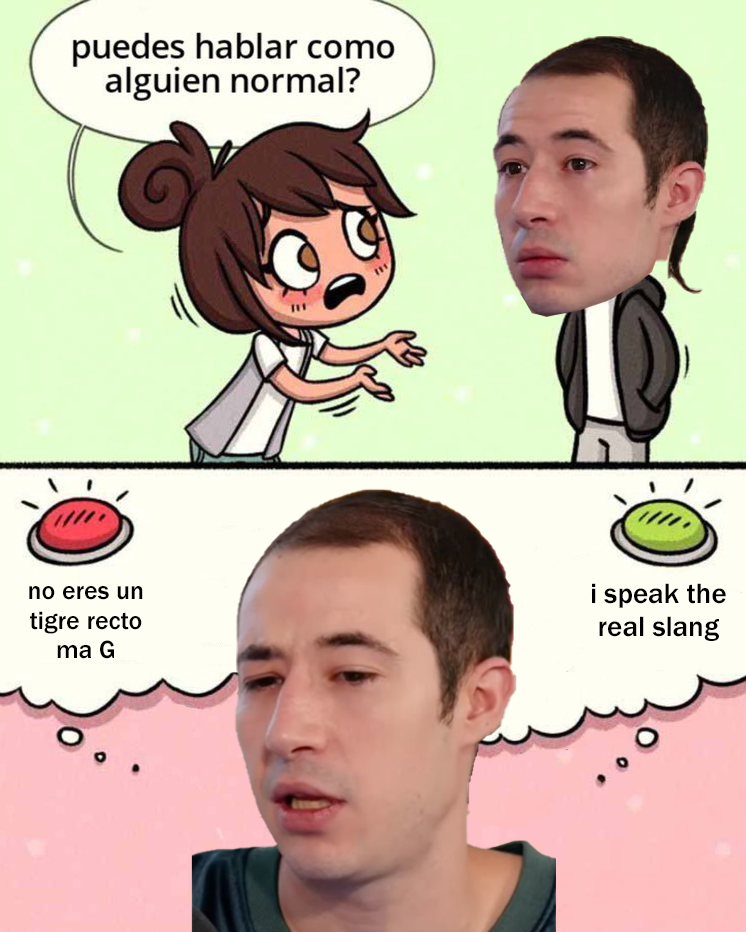
<style>
.page{position:relative;width:746px;height:932px}
.page>*{position:absolute;margin:0}
.t1{font:26px "FranklinGothic-Medium";color:#000000}
.t2{font:29px "FranklinGothic-Medium";color:#000000}
</style>
<div class="page">
<p class="t1" style="left:29px;top:586px;width:114px;height:73px;text-align:center">no eres un<br>tigre recto<br>ma G</p>
<p class="t2" style="left:592px;top:583px;width:134px;height:58px;text-align:center">i speak the<br>real slang</p>
</div>
